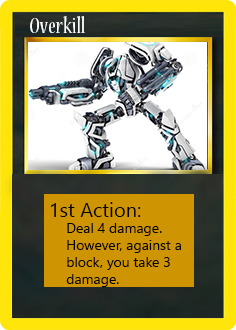
<style>
.page{position:relative;width:236px;height:330px}
.page>*{position:absolute;margin:0}
.t1{font:24px "NuevaStd-Cond";color:#ffffff}
.t2{font:20px "LeelawadeeUI";color:#000000}
.t3{font:14px "LeelawadeeUI";color:#000000}
</style>
<div class="page">
<p class="t1" style="left:30px;top:16px;width:55px;height:17px">Overkill</p>
<p class="t2" style="left:50px;top:202px;width:91px;height:15px">1st Action:</p>
<p class="t3" style="left:66px;top:223px;width:115px;height:64px">Deal 4 damage. <br>However, against a <br>block, you take 3 <br>damage.</p>
</div>
